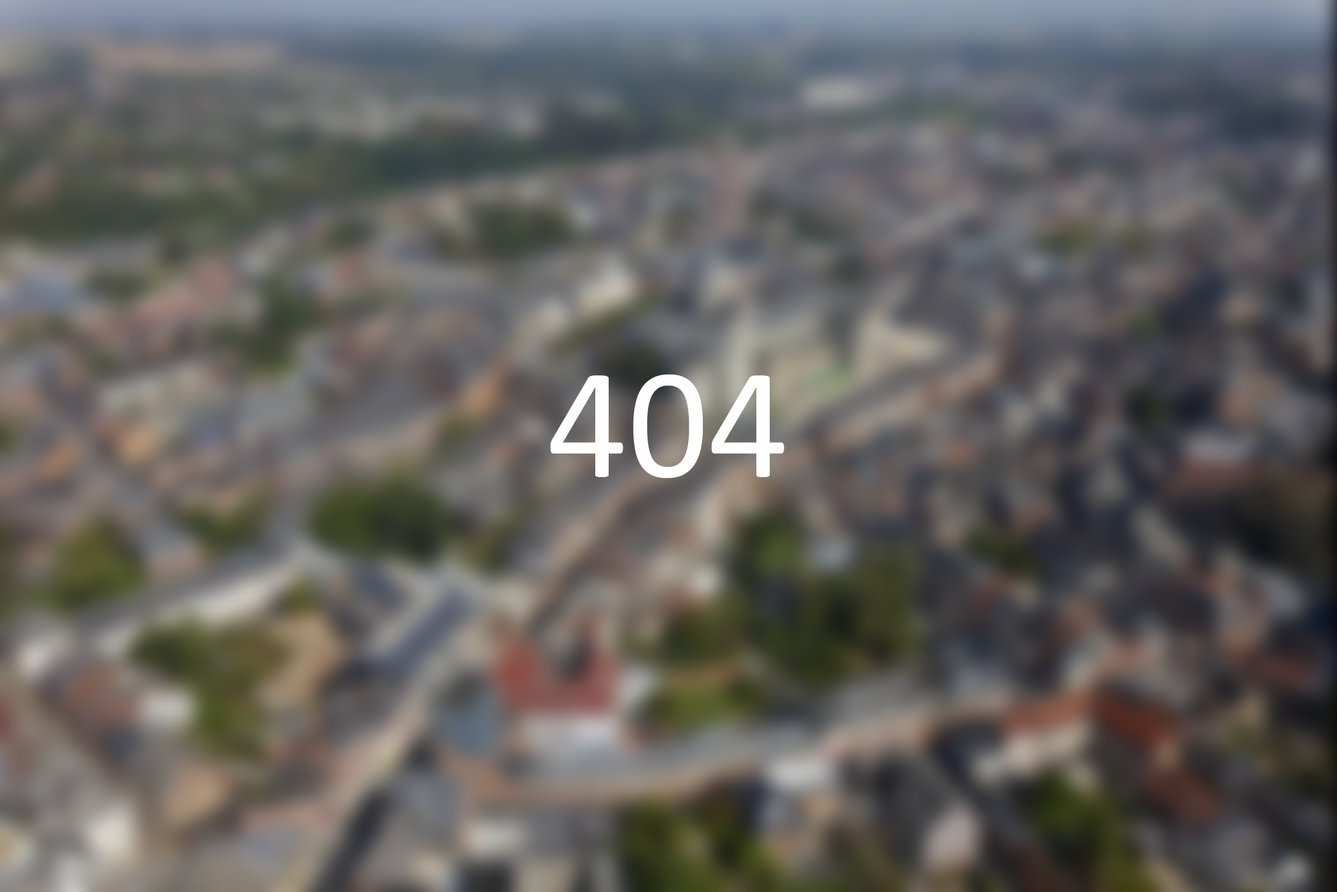
<style>
.page{position:relative;width:1337px;height:892px}
.page>*{position:absolute;margin:0}
.t1{font:159.2px "Calibri";color:#fffefe}
</style>
<div class="page">
<p class="t1" style="left:550px;top:374px;width:235px;height:104px">404</p>
</div>
